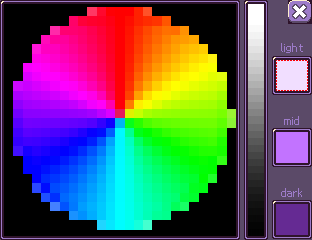
<style>
.page{position:relative;width:312px;height:240px}
.page>*{position:absolute;margin:0}
.t1{font:16px "Nintendo-DS-BIOS";color:#9d7bc9}
</style>
<div class="page">
<p class="t1" style="left:281px;top:43px;width:22px;height:10px">light</p>
<p class="t1" style="left:284px;top:116px;width:15px;height:9px">mid</p>
<p class="t1" style="left:281px;top:188px;width:21px;height:9px">dark</p>
</div>
